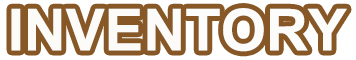
<style>
.page{position:relative;width:356px;height:60px;background:#875826}
.page>*{position:absolute;margin:0}
.t1{font:58px "Arial-BoldMT";color:#ffffff}
</style>
<div class="page">
<p class="t1" style="left:11px;top:8px;width:336px;height:44px">INVENTORY</p>
</div>
